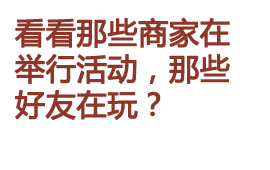
<style>
.page{position:relative;width:270px;height:170px;background:#ffffff}
.page>*{position:absolute;margin:0}
.t1{font:30px/18px "MicrosoftYaHei";color:#8e3728;font-weight:bold}
</style>
<div class="page">
<p class="t1" style="left:14px;top:17px;width:216px;height:104px">看看那些商家在<br><br>举行活动，那些<br><br>好友在玩？</p>
</div>
